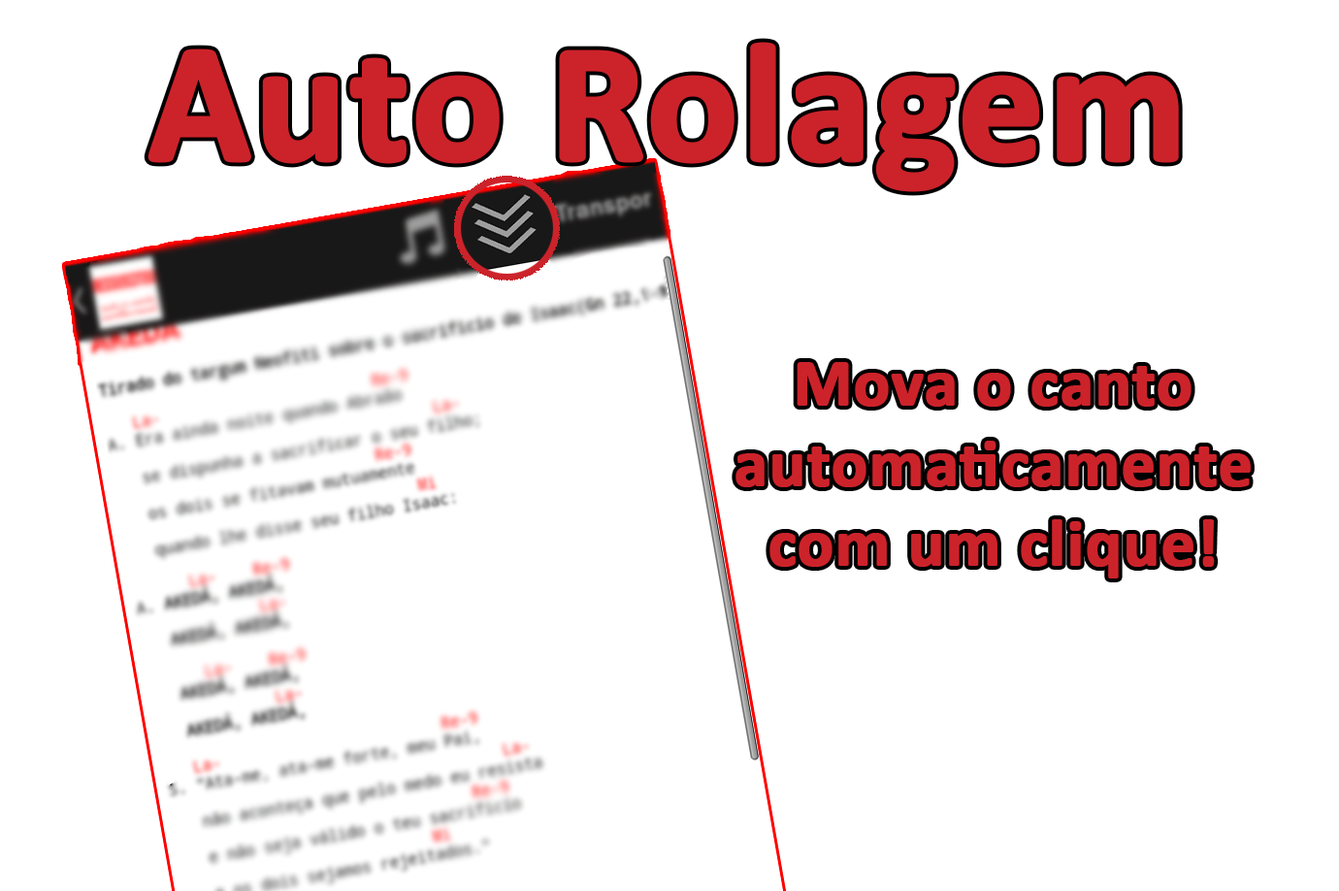
<style>
.page{position:relative;width:1339px;height:891px;background:#ffffff}
.page>*{position:absolute;margin:0}
.t1{font:168.8px "Calibri-Bold";color:#cc232b;font-weight:bold}
.t2{font:66.9px "Calibri-Bold";color:#cc232b;font-weight:bold}
</style>
<div class="page">
<p class="t1" style="left:147px;top:42px;width:1032px;height:150px">Auto Rolagem</p>
<p class="t2" style="left:735px;top:362px;width:516px;height:216px;text-align:center">Mova o canto <br>automaticamente  com um clique!</p>
</div>
